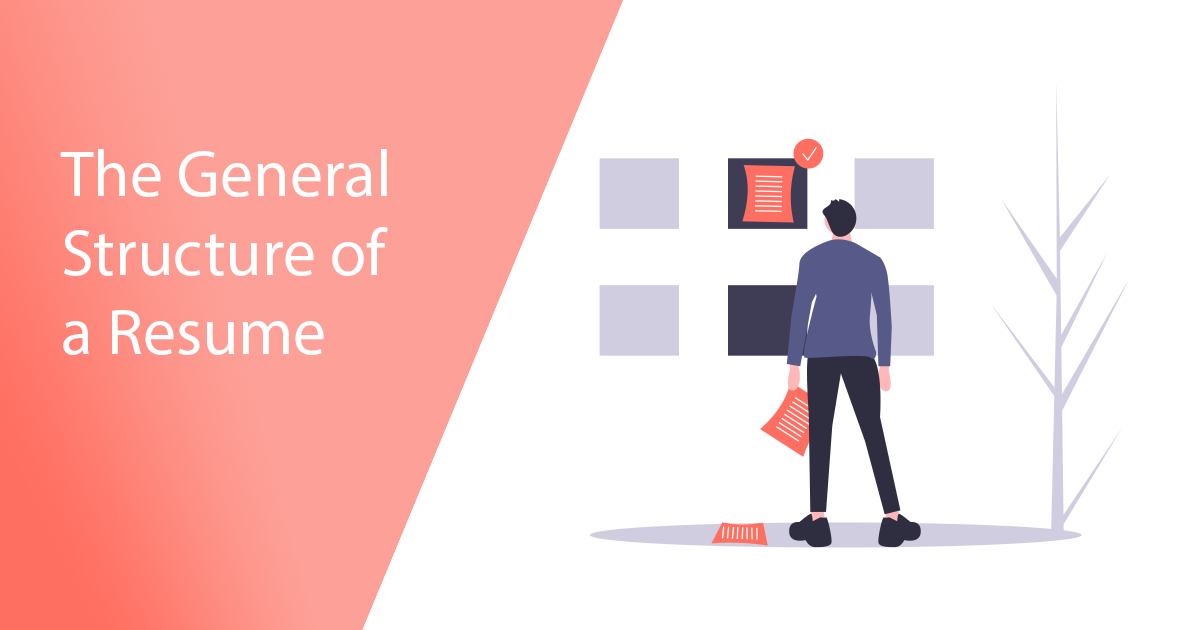
<style>
.page{position:relative;width:1200px;height:630px;background:#ffffff}
.page>*{position:absolute;margin:0}
.t1{font:66px "MyriadPro-Regular";color:#ffffff}
</style>
<div class="page">
<p class="t1" style="left:60px;top:149px;width:328px;height:206px">The General<br>Structure of <br>a Resume</p>
</div>
